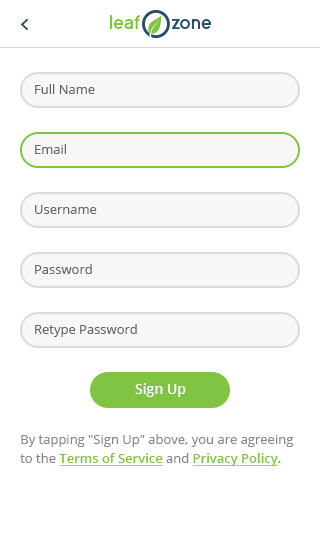
<style>
.page{position:relative;width:320px;height:552px;background:#ffffff}
.page>*{position:absolute;margin:0}
.t1{font:13px "OpenSans";color:#666666}
.t2{font:14px "OpenSans-Semibold";color:#ffffff}
.t3{font:13px/19px "OpenSans";color:#888888}
.t4{font:13px/19px "OpenSans-Semibold";color:#81c342;text-decoration:underline}
</style>
<div class="page">
<p class="t1" style="left:35px;top:84px;width:60px;height:10px">Full Name</p>
<p class="t1" style="left:35px;top:144px;width:31px;height:10px">Email</p>
<p class="t1" style="left:35px;top:205px;width:62px;height:9px">Username</p>
<p class="t1" style="left:35px;top:264px;width:57px;height:10px">Password</p>
<p class="t1" style="left:35px;top:324px;width:102px;height:13px">Retype Password</p>
<p class="t2" style="left:135px;top:383px;width:51px;height:14px">Sign Up</p>
<p class="t3" style="left:20px;top:434px;width:274px;height:32px">By tapping "Sign Up" above, you are agreeing to the <span class="t4">Terms of Service</span> and <span class="t4">Privacy Policy</span>.</p>
</div>
